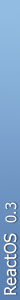
<style>
.page{position:relative;width:20px;height:300px}
.page>*{position:absolute;margin:0}
.t1{font:16px "Verdana";color:#ffffff;scale:0.93 1}
.t2{font:14px "Verdana";color:#ffffff;scale:0.93 1}
</style>
<div class="page">
<p class="t1" style="left:3px;top:202px;width:14px;height:93px;rotate:-90deg">ReactOS<span class="t2">  0.3</span></p>
</div>
